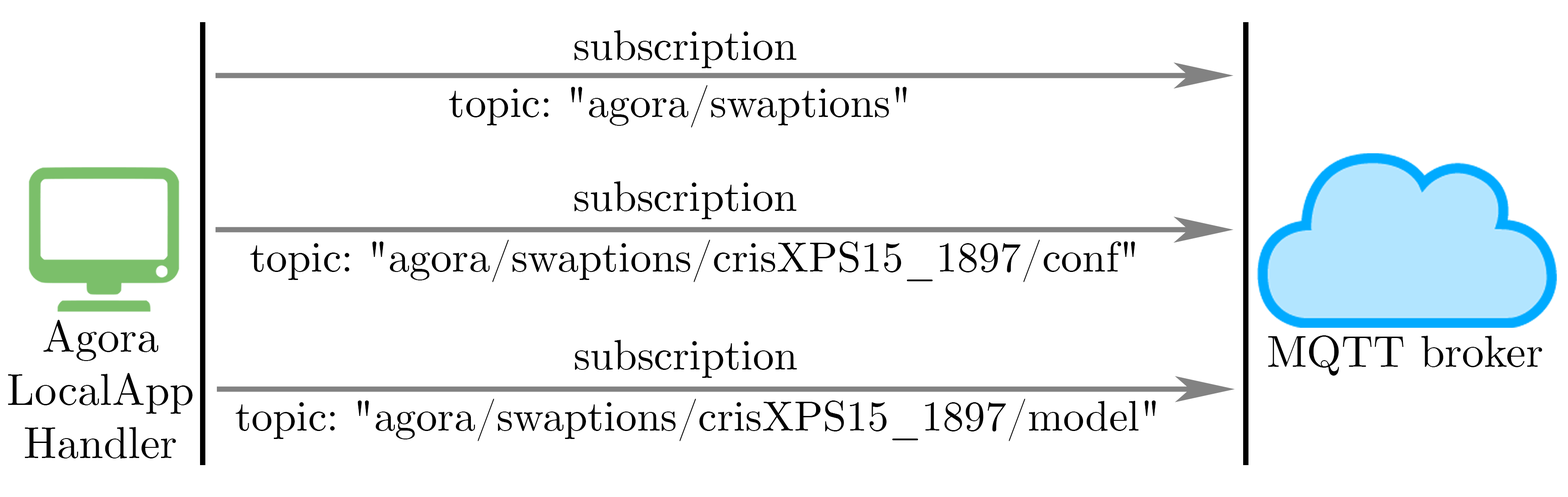
<style>
.page{position:relative;width:1568px;height:497px;background:#ffffff}
.page>*{position:absolute;margin:0}
.t1{font:42.4px "CMUSerif-Roman";color:#000000}
.t2{font:44.3px "CMUSerif-Roman";color:#000000}
</style>
<div class="page">
<p class="t1" style="left:574px;top:30px;width:223px;height:38px">subscription</p>
<p class="t1" style="left:449px;top:85px;width:458px;height:42px">topic: "agora/swaptions"</p>
<p class="t1" style="left:574px;top:181px;width:223px;height:38px">subscription</p>
<p class="t1" style="left:250px;top:239px;width:885px;height:43px">topic: "agora/swaptions/crisXPS15_1897/conf"</p>
<p class="t2" style="left:8px;top:320px;width:185px;height:138px;text-align:center">Agora<br>LocalApp<br>Handler</p>
<p class="t1" style="left:575px;top:339px;width:222px;height:39px">subscription</p>
<p class="t2" style="left:1268px;top:335px;width:274px;height:40px">MQTT broker</p>
<p class="t1" style="left:235px;top:398px;width:921px;height:43px">topic: "agora/swaptions/crisXPS15_1897/model"</p>
</div>
